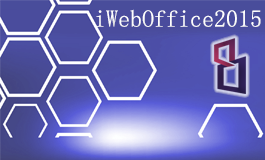
<style>
.page{position:relative;width:265px;height:160px}
.page>*{position:absolute;margin:0}
.t1{font:24px "YouYuan";color:#ffffff}
</style>
<div class="page">
<p class="t1" style="left:96px;top:9px;width:165px;height:18px">iWebOffice2015</p>
</div>
